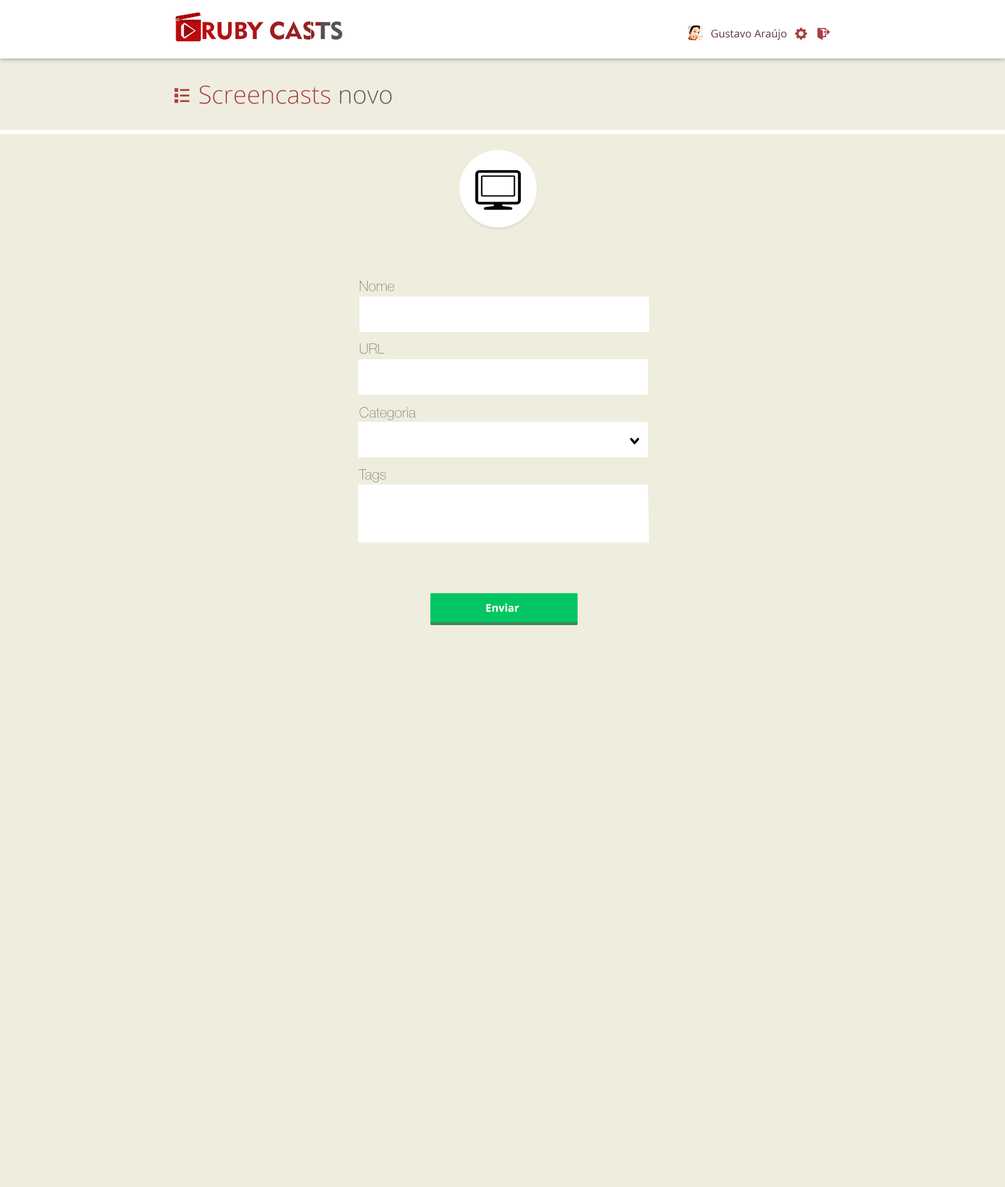
<style>
.page{position:relative;width:1005px;height:1187px;background:#efedde}
.page>*{position:absolute;margin:0}
.t1{font:10.6px "OpenSans";color:#602728}
.t2{font:24.8px "OpenSans-Light";color:#a93e42}
.t3{font:24.8px "OpenSans-Light";color:#5b5a5a}
.t4{font:14.2px "HelveticaNeue-Thin";color:#7c7b6f}
.t5{font:10.6px "OpenSans-Bold";color:#ffffff}
</style>
<div class="page">
<p class="t1" style="left:711px;top:29px;width:75px;height:11px">Gustavo Araújo</p>
<p class="t2" style="left:199px;top:85px;width:193px;height:19px">Screencasts <span class="t3">novo</span></p>
<p class="t4" style="left:359px;top:281px;width:35px;height:10px">Nome</p>
<p class="t4" style="left:359px;top:343px;width:26px;height:11px">URL</p>
<p class="t4" style="left:359px;top:407px;width:57px;height:14px">Categoria</p>
<p class="t4" style="left:359px;top:469px;width:27px;height:14px">Tags</p>
<p class="t5" style="left:486px;top:603px;width:33px;height:9px">Enviar</p>
</div>
